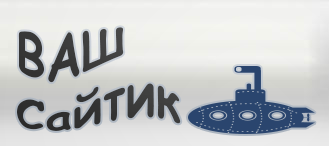
<style>
.page{position:relative;width:329px;height:146px}
.page>*{position:absolute;margin:0}
.t1{font:48px "ComicSansMS-Bold";color:#383838}
</style>
<div class="page">
<p class="t1" style="left:17px;top:27px;width:164px;height:104px">ВАШ<br>Сайтик</p>
</div>
